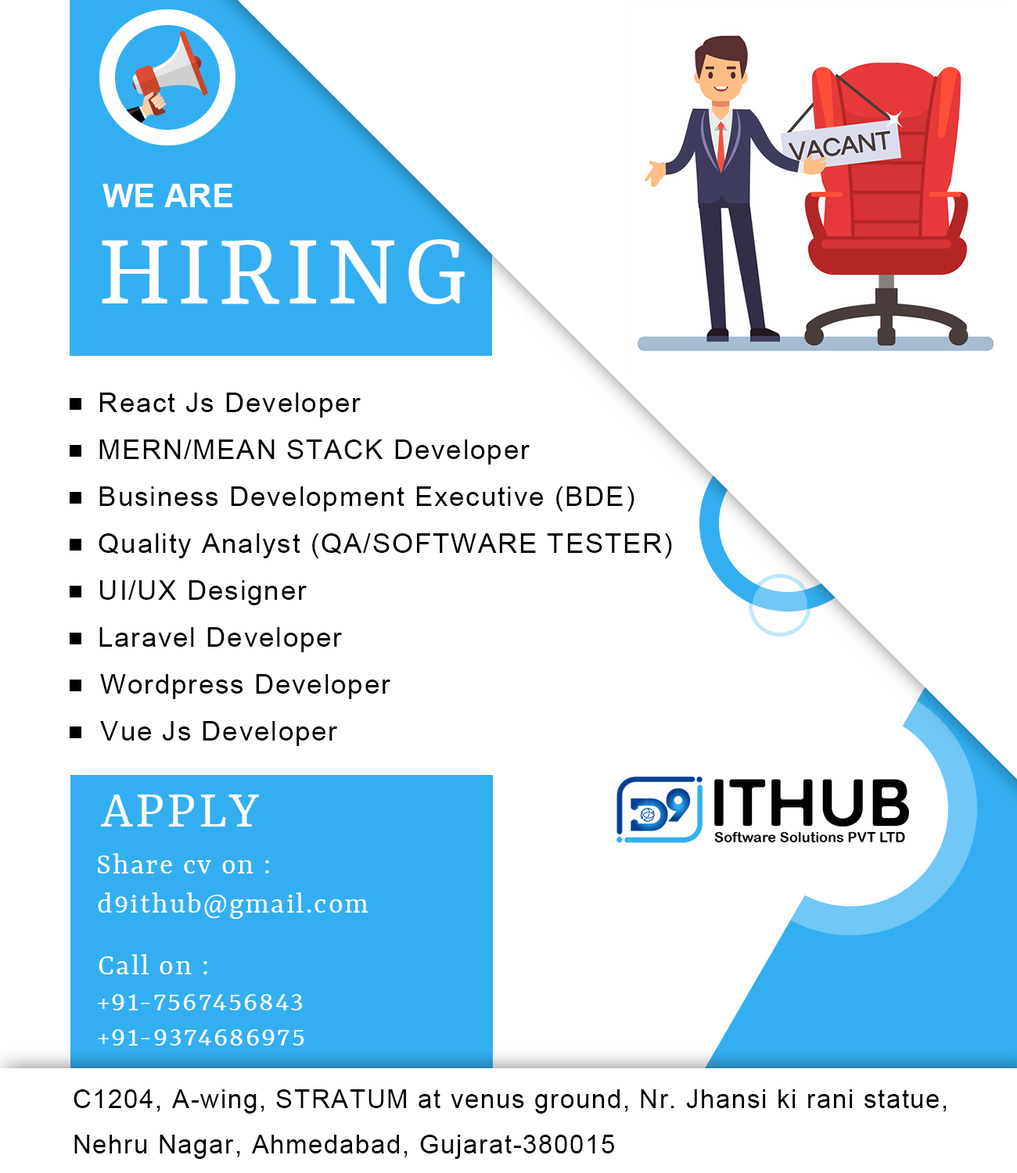
<style>
.page{position:relative;width:1017px;height:1173px;background:#ffffff}
.page>*{position:absolute;margin:0}
.t1{font:32.8px "Arial-BoldMT";color:#ffffff}
.t2{font:111px "Rasa-Regular";letter-spacing:0.05em;color:#ffffff}
.t3{font:27.4px "ArialMT";letter-spacing:0.05em;color:#000000}
.t4{font:56.3px "Rasa-Regular";letter-spacing:0.05em;color:#ffffff}
.t5{font:31.3px "Rasa-Regular";letter-spacing:0.05em;color:#ffffff}
.t6{font:25.8px "ArialMT";letter-spacing:0.05em;color:#000000}
</style>
<div class="page">
<p class="t1" style="left:102px;top:184px;width:130px;height:23px">WE ARE</p>
<p class="t2" style="left:102px;top:239px;width:363px;height:65px">HIRING</p>
<p class="t3" style="left:99px;top:393px;width:262px;height:25px">React Js Developer</p>
<p class="t3" style="left:99px;top:439px;width:431px;height:26px">MERN/MEAN STACK Developer</p>
<p class="t3" style="left:99px;top:486px;width:535px;height:25px">Business Development Executive (BDE)</p>
<p class="t3" style="left:99px;top:533px;width:573px;height:25px">Quality Analyst (QA/SOFTWARE TESTER)</p>
<p class="t3" style="left:99px;top:580px;width:208px;height:25px">UI/UX Designer</p>
<p class="t3" style="left:99px;top:627px;width:244px;height:25px">Laravel Developer</p>
<p class="t3" style="left:100px;top:674px;width:291px;height:25px">Wordpress Developer</p>
<p class="t3" style="left:100px;top:721px;width:238px;height:25px">Vue Js Developer</p>
<p class="t4" style="left:101px;top:794px;width:158px;height:33px">APPLY</p>
<p class="t5" style="left:98px;top:853px;width:171px;height:20px">Share cv on :</p>
<p class="t5" style="left:98px;top:892px;width:270px;height:27px">d9ithub@gmail.com</p>
<p class="t5" style="left:99px;top:954px;width:108px;height:20px">Call on :</p>
<p class="t5" style="left:98px;top:994px;width:205px;height:16px">+91-7567456843</p>
<p class="t5" style="left:98px;top:1029px;width:206px;height:17px">+91-9374686975</p>
<p class="t6" style="left:74px;top:1089px;width:872px;height:70px">C1204, A-wing, STRATUM at venus ground, Nr. Jhansi ki rani statue, <br>Nehru Nagar, Ahmedabad, Gujarat-380015</p>
</div>
